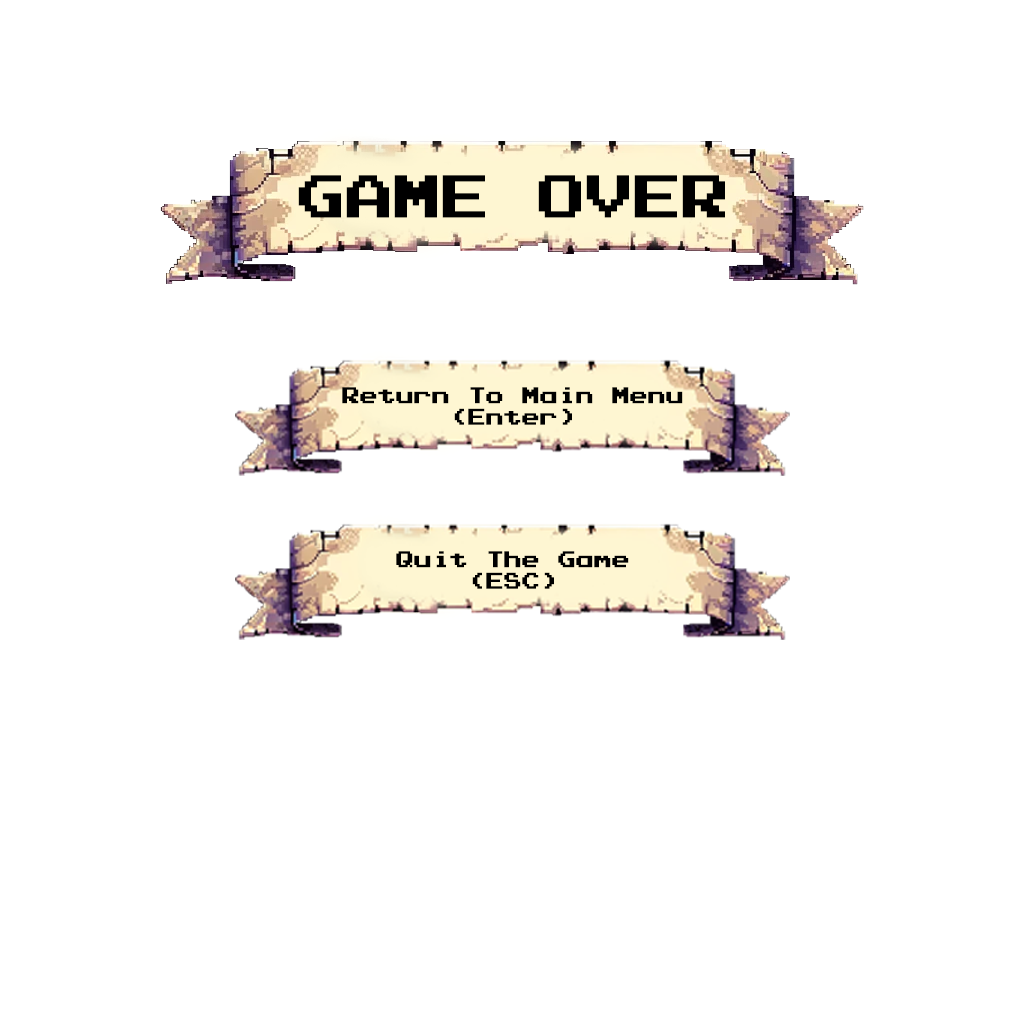
<style>
.page{position:relative;width:1024px;height:1024px;background:#ffffff}
.page>*{position:absolute;margin:0}
.t1{font:48px "PressStartK";color:#000000}
.t2{font:18px "PressStartK";color:#000000}
</style>
<div class="page">
<p class="t1" style="left:298px;top:175px;width:427px;height:43px">GAME OVER</p>
<p class="t2" style="left:342px;top:387px;width:341px;height:38px;text-align:center">Return To Main Menu<br>(Enter)</p>
<p class="t2" style="left:396px;top:551px;width:233px;height:38px;text-align:center">Quit The Game<br>(ESC)</p>
</div>
